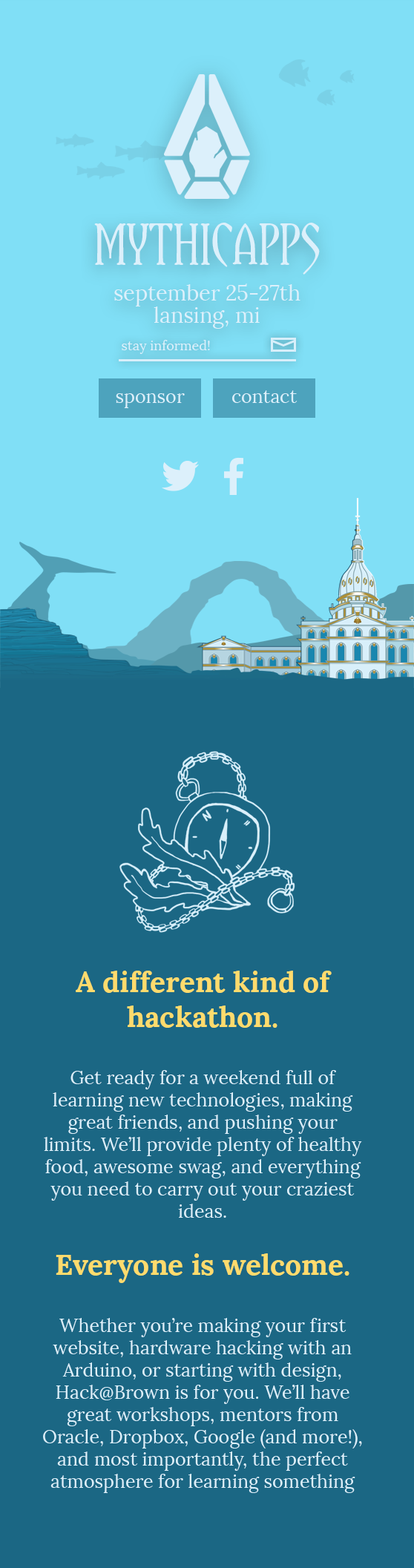
<style>
.page{position:relative;width:414px;height:1568px;background:#1b6784}
.page>*{position:absolute;margin:0}
.t1{font:21.4px/36.4px "Lora-Regular";color:#dcf0fb}
.t2{font:42.7px/36.4px "Yataghan-Regular";color:#dcf0fb}
.t3{font:21.4px/22.5px "Lora-Regular";color:#dcf0fb}
.t4{font:13.4px "Lora-Regular";color:#dcf0fb}
.t5{font:18.6px "Lora-Regular";color:#dcf0fb}
.t6{font:28.9px "Lora-Bold";color:#ffdb6d}
</style>
<div class="page">
<p class="t1" style="left:94px;top:223px;width:226px;height:106px;text-align:center"><span class="t2">MYTHICAPPS<br></span>september 25-27th<br><span class="t3">lansing, mi</span></p>
<p class="t4" style="left:122px;top:340px;width:88px;height:14px">stay informed!</p>
<p class="t5" style="left:116px;top:393px;width:69px;height:15px">sponsor</p>
<p class="t5" style="left:232px;top:390px;width:66px;height:13px">contact</p>
<p class="t5" style="left:43px;top:971px;width:319px;height:522px;text-align:center"><span class="t6">A different kind of hackathon.<br><br></span>Get ready for a weekend full of learning new technologies, making great friends, and pushing your limits. We’ll provide plenty of healthy food, awesome swag, and everything you need to carry out your craziest ideas.<br><br><span class="t6">Everyone is welcome.<br><br></span>Whether you’re making your first website, hardware hacking with an Arduino, or starting with design, Hack@Brown is for you. We’ll have great workshops, mentors from Oracle, Dropbox, Google (and more!), and most importantly, the perfect atmosphere for learning something new.<br><br>Ready? Let's go.</p>
</div>
